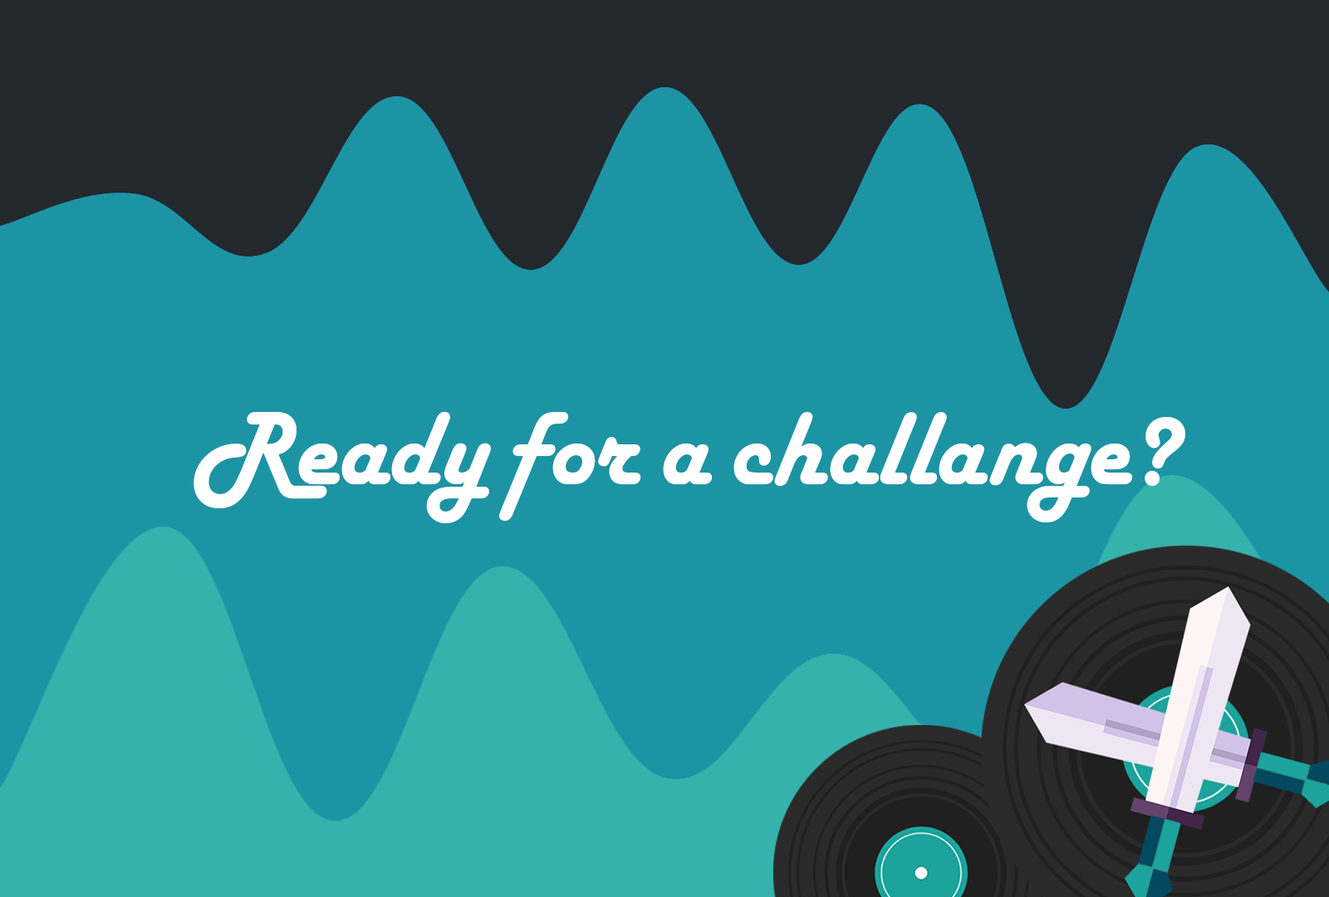
<style>
.page{position:relative;width:1329px;height:897px;background:#1c94a4}
.page>*{position:absolute;margin:0}
.t1{font:108px "HarlowSolidPlain";color:#ffffff}
</style>
<div class="page">
<p class="t1" style="left:194px;top:411px;width:991px;height:112px">Ready for a challange?</p>
</div>
